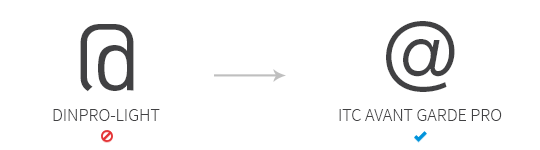
<style>
.page{position:relative;width:540px;height:150px;background:#ffffff}
.page>*{position:absolute;margin:0}
.t1{font:93.3px "DINPro-Regular";letter-spacing:-0.05em;color:#414143;text-transform:uppercase}
.t2{font:93.3px "ITCAvantGardePro-Bk";letter-spacing:-0.05em;color:#414143;text-transform:uppercase}
.t3{font:18px "SourceSansPro-Light";color:#414143;text-transform:uppercase}
</style>
<div class="page">
<p class="t1" style="left:80px;top:24px;width:54px;height:68px">@</p>
<p class="t2" style="left:386px;top:21px;width:69px;height:71px">@</p>
<p class="t3" style="left:53px;top:109px;width:107px;height:12px">DINPRO-LIGHT</p>
<p class="t3" style="left:339px;top:109px;width:163px;height:12px">ITC Avant Garde Pro</p>
</div>
